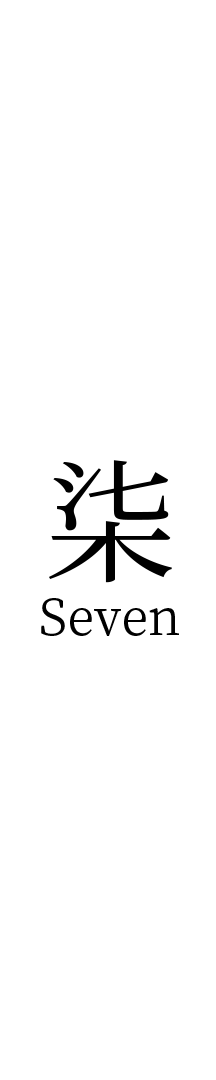
<style>
.page{position:relative;width:216px;height:1080px;background:#ffffff}
.page>*{position:absolute;margin:0}
.t1{font:133.3px "NotoSerifCJKsc-Regular";color:#000000}
.t2{font:50px "NotoSerifCJKsc-Regular";color:#000000}
</style>
<div class="page">
<p class="t1" style="left:49px;top:460px;width:123px;height:123px">柒</p>
<p class="t2" style="left:41px;top:598px;width:138px;height:38px">Seven</p>
</div>
